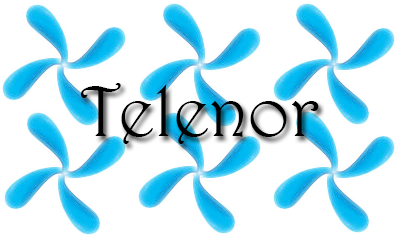
<style>
.page{position:relative;width:399px;height:239px;background:#ffffff}
.page>*{position:absolute;margin:0}
.t1{font:72px "Harrington";color:#000000}
</style>
<div class="page">
<p class="t1" style="left:80px;top:83px;width:239px;height:61px">Telenor</p>
</div>
